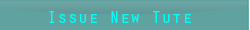
<style>
.page{position:relative;width:250px;height:30px;background:#5fa2a0}
.page>*{position:absolute;margin:0}
.t1{font:16.7px "OratorStd";color:#00fef6;scale:1.04 1}
</style>
<div class="page">
<p class="t1" style="left:49px;top:11px;width:142px;height:12px">Issue New Tute</p>
</div>
